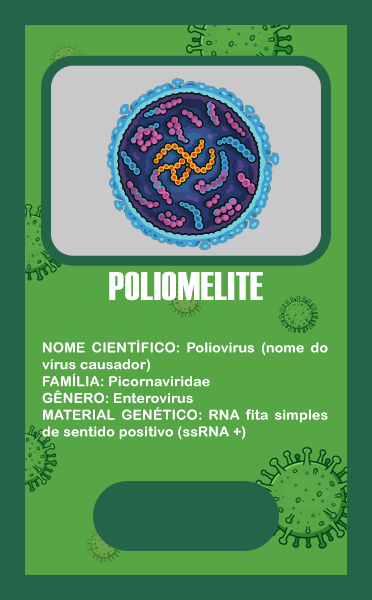
<style>
.page{position:relative;width:372px;height:600px;background:#56a645}
.page>*{position:absolute;margin:0}
.t1{font:40px "Haettenschweiler";letter-spacing:0.015em;color:#ffffff}
.t2{font:14px "ArialRoundedMTBold";letter-spacing:0.015em;color:#ffffff}
</style>
<div class="page">
<p class="t1" style="left:109px;top:271px;width:154px;height:30px">POLIOMELITE</p>
<p class="t2" style="left:42px;top:340px;width:286px;height:100px;text-align:justify">NOME CIENTÍFICO: Poliovirus (nome do vírus causador)<br>FAMÍLIA: Picornaviridae<br>GÊNERO: Enterovirus<br>MATERIAL GENÉTICO: RNA fita simples de sentido positivo (ssRNA +)</p>
</div>
